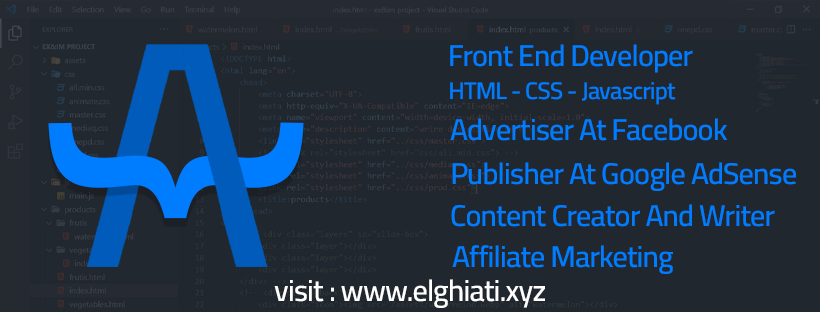
<style>
.page{position:relative;width:820px;height:312px;background:#21272e}
.page>*{position:absolute;margin:0}
.t1{font:30px "Cairo-SemiBold";letter-spacing:-0.025em;color:#007dff}
.t2{font:24px "Cairo-SemiBold";letter-spacing:-0.025em;color:#007dff}
.t3{font:288.2px "Cairo-SemiBold";letter-spacing:-0.025em;color:#007dff;scale:1.12 1}
.t4{font:30px "Cairo-SemiBold";letter-spacing:-0.025em;color:#ffffff}
</style>
<div class="page">
<p class="t1" style="left:450px;top:44px;width:243px;height:29px">Front End Developer</p>
<p class="t2" style="left:450px;top:82px;width:226px;height:23px">HTML - CSS - Javascript</p>
<p class="t3" style="left:48px;top:122px;width:256px;height:97px;rotate:90deg">}</p>
<p class="t1" style="left:450px;top:118px;width:278px;height:23px">Advertiser At Facebook</p>
<p class="t1" style="left:452px;top:162px;width:344px;height:29px">Publisher At Google AdSense</p>
<p class="t1" style="left:451px;top:204px;width:324px;height:23px">Content Creator And Writer</p>
<p class="t1" style="left:452px;top:245px;width:221px;height:29px">Affiliate Marketing</p>
<p class="t4" style="left:274px;top:279px;width:271px;height:29px">visit : www.elghiati.xyz</p>
</div>
